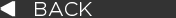
<style>
.page{position:relative;width:176px;height:18px;background:#333333}
.page>*{position:absolute;margin:0}
.t1{font:20px "Gotham-Light";color:#ffffff;text-transform:uppercase}
</style>
<div class="page">
<p class="t1" style="left:35px;top:2px;width:57px;height:14px">back</p>
</div>
